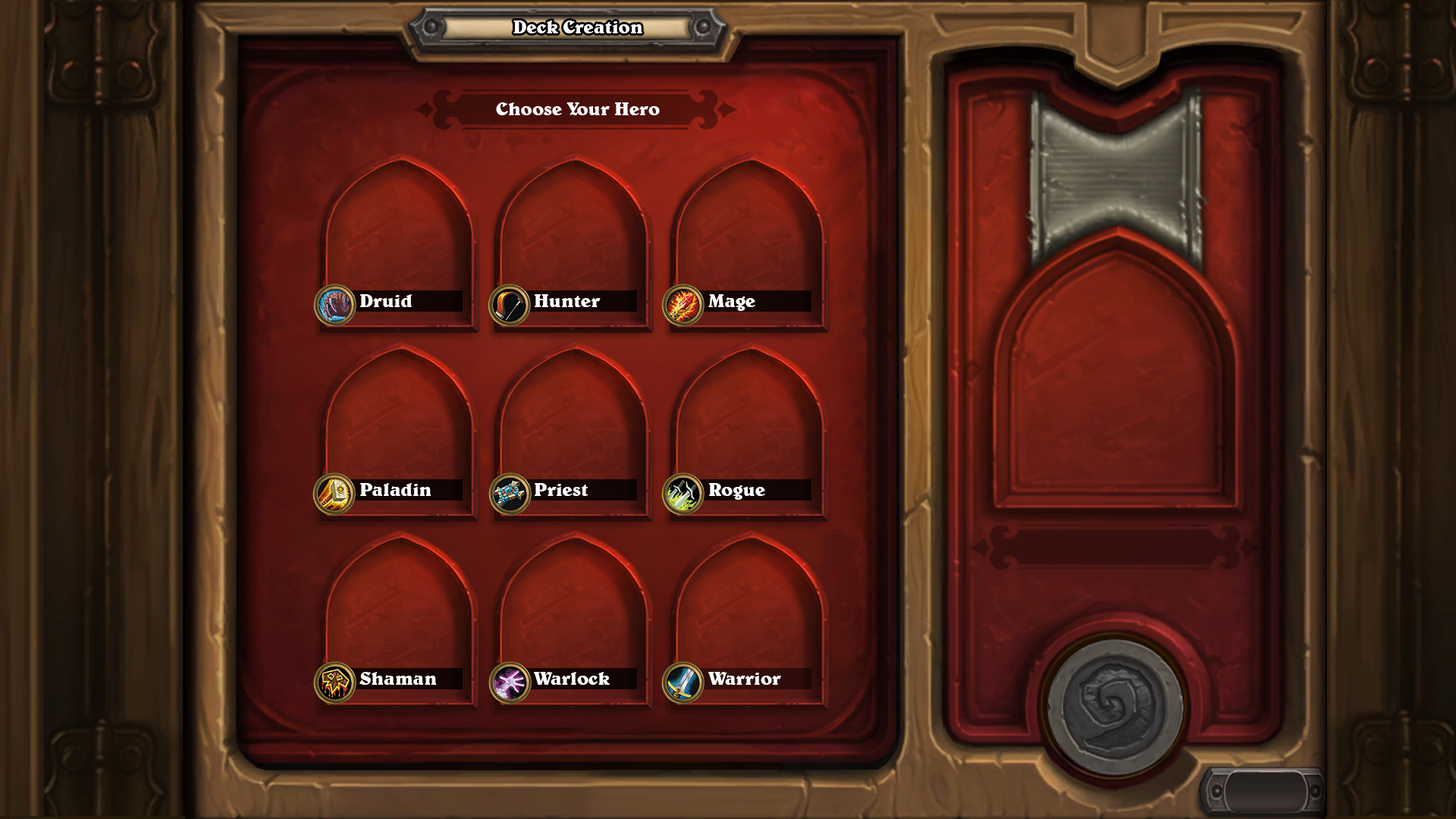
<style>
.page{position:relative;width:1456px;height:819px}
.page>*{position:absolute;margin:0}
.t1{font:19px "BelweBT-Bold";color:#ffffff}
</style>
<div class="page">
<p class="t1" style="left:513px;top:20px;width:129px;height:13px">Deck Creation</p>
<p class="t1" style="left:496px;top:102px;width:164px;height:13px">Choose Your Hero</p>
<p class="t1" style="left:360px;top:294px;width:52px;height:13px">Druid</p>
<p class="t1" style="left:535px;top:294px;width:66px;height:13px">Hunter</p>
<p class="t1" style="left:708px;top:294px;width:47px;height:17px">Mage</p>
<p class="t1" style="left:360px;top:483px;width:71px;height:13px">Paladin</p>
<p class="t1" style="left:535px;top:483px;width:53px;height:13px">Priest</p>
<p class="t1" style="left:709px;top:483px;width:56px;height:17px">Rogue</p>
<p class="t1" style="left:359px;top:672px;width:77px;height:13px">Shaman</p>
<p class="t1" style="left:534px;top:672px;width:76px;height:13px">Warlock</p>
<p class="t1" style="left:708px;top:672px;width:73px;height:13px">Warrior</p>
</div>
